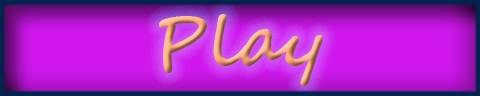
<style>
.page{position:relative;width:480px;height:96px}
.page>*{position:absolute;margin:0}
.t1{font:70.9px "SegoeScript-Bold"}
</style>
<div class="page">
<p class="t1" style="left:159px;top:14px;width:164px;height:72px">Play</p>
</div>
